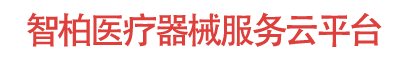
<style>
.page{position:relative;width:400px;height:64px;background:#ffffff}
.page>*{position:absolute;margin:0}
.t1{font:36px "STHeiti";letter-spacing:-0.1em;color:#de3f3b}
</style>
<div class="page">
<p class="t1" style="left:27px;top:12px;width:355px;height:35px">智柏医疗器械服务云平台</p>
</div>
